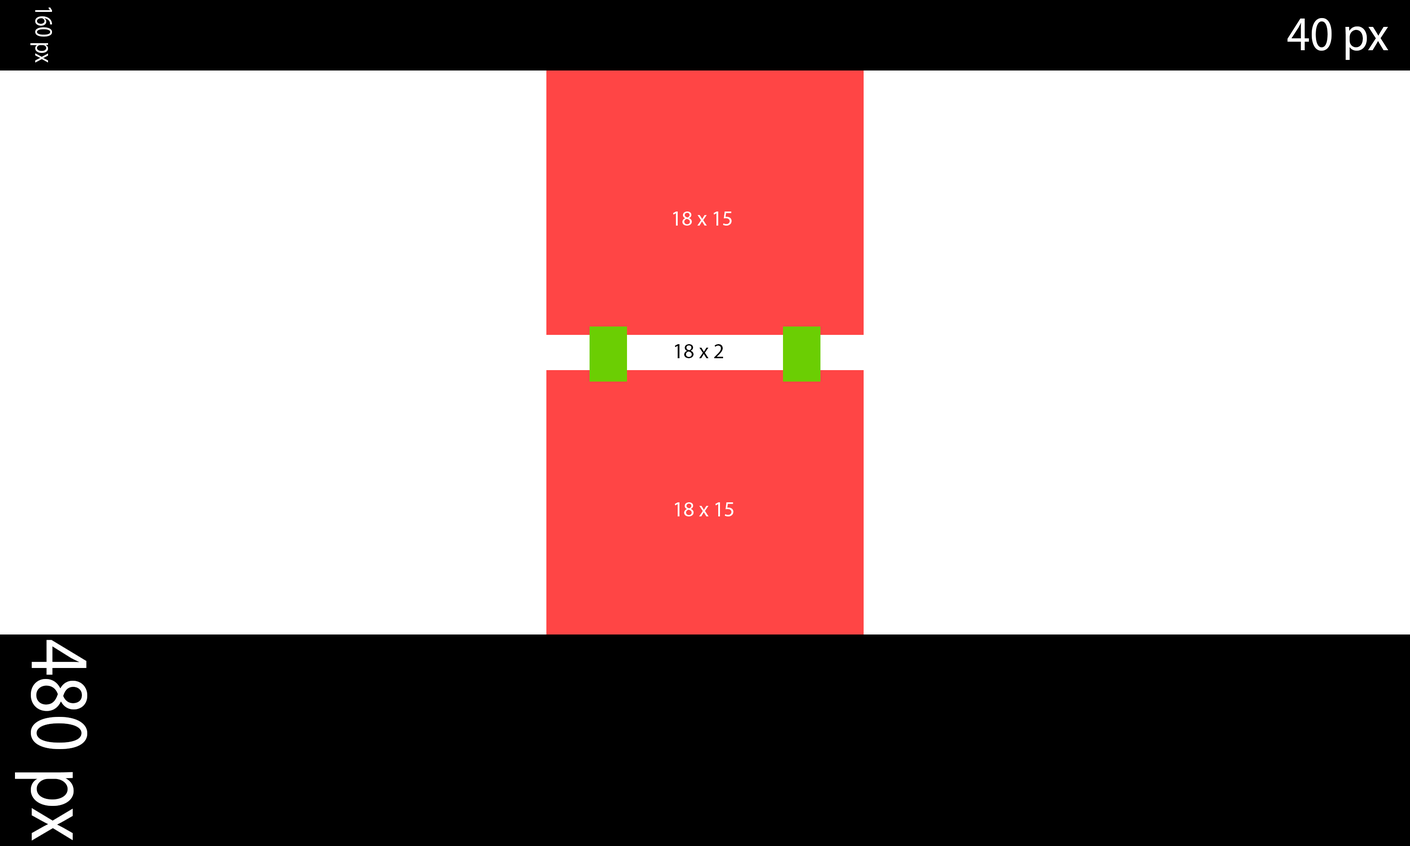
<style>
.page{position:relative;width:1410px;height:846px;background:#ffffff}
.page>*{position:absolute;margin:0}
.t1{font:25.5px "MyriadPro-Regular";color:#ffffff;scale:0.82 1}
.t2{font:48.6px "MyriadPro-Regular";color:#ffffff;scale:0.93 1}
.t3{font:21.1px "MyriadPro-Regular";color:#ffffff}
.t4{font:21.1px "MyriadPro-Regular";color:#000000}
.t5{font:84.3px "MyriadPro-Regular";color:#ffffff;scale:0.87 1}
</style>
<div class="page">
<p class="t1" style="left:30px;top:7px;width:22px;height:56px;rotate:90deg">160 px</p>
<p class="t2" style="left:1287px;top:18px;width:101px;height:42px">40 px</p>
<p class="t3" style="left:673px;top:211px;width:59px;height:15px">18 x 15</p>
<p class="t4" style="left:674px;top:344px;width:49px;height:14px">18 x 2</p>
<p class="t3" style="left:674px;top:502px;width:60px;height:14px">18 x 15</p>
<p class="t5" style="left:15px;top:640px;width:72px;height:201px;rotate:90deg">480 px</p>
</div>
